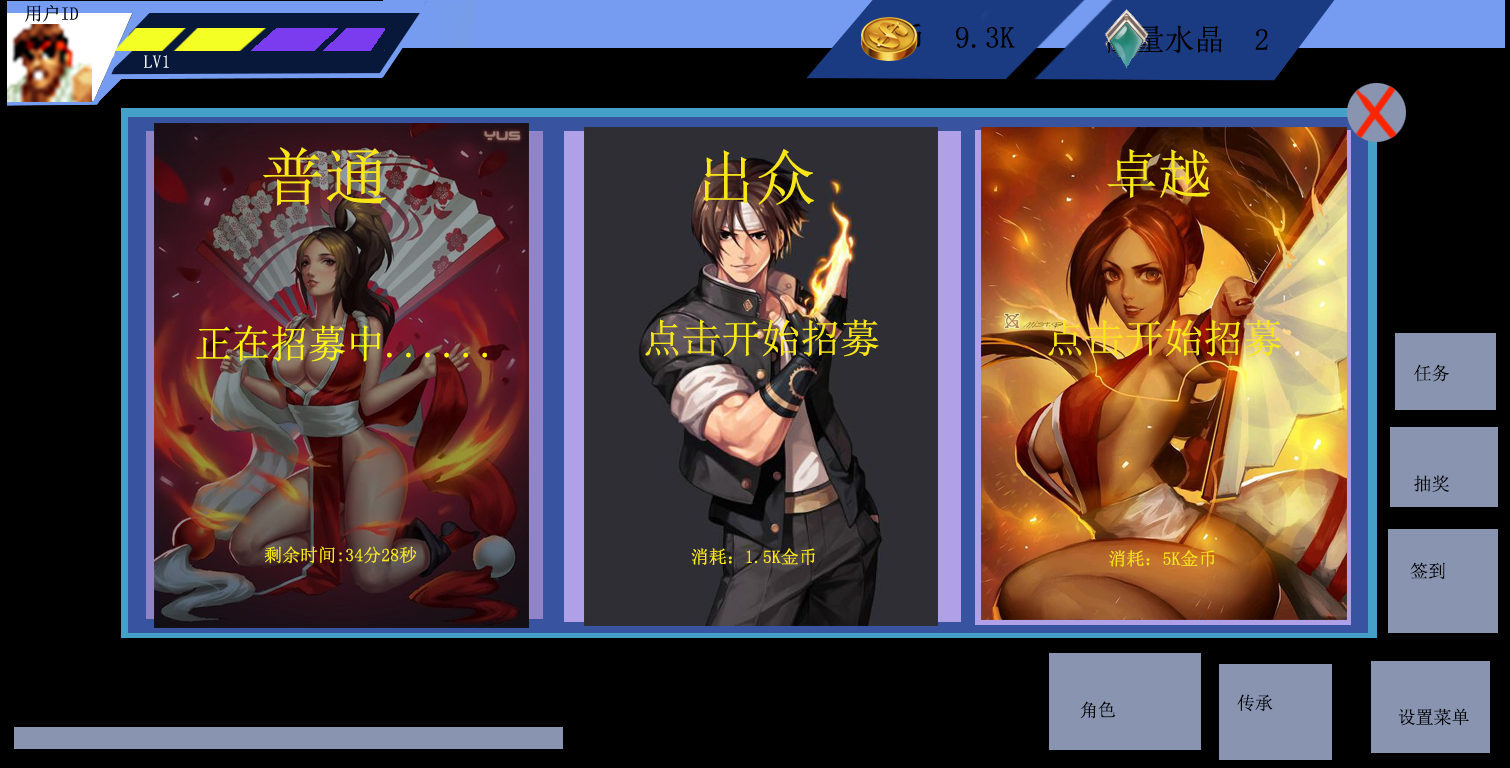
<style>
.page{position:relative;width:1510px;height:768px;background:#000000}
.page>*{position:absolute;margin:0}
.t1{font:63px "SimSun";color:#f9e616}
.t2{font:60px "SimSun";color:#f9e616}
.t3{font:53px "SimSun";color:#f9e616}
.t4{font:39px "SimSun";color:#fff600}
.t5{font:40px "SimSun";color:#f9e616}
.t6{font:18px "SimSun";color:#000000}
.t7{font:18px "SimSun";color:#f9e616}
</style>
<div class="page">
<p class="t1" style="left:263px;top:147px;width:123px;height:59px">普通</p>
<p class="t2" style="left:703px;top:149px;width:111px;height:56px">出众</p>
<p class="t3" style="left:1107px;top:149px;width:103px;height:49px">卓越</p>
<p class="t4" style="left:196px;top:325px;width:291px;height:37px">正在招募中......</p>
<p class="t5" style="left:645px;top:319px;width:234px;height:38px">点击开始招募</p>
<p class="t5" style="left:1048px;top:319px;width:234px;height:38px">点击开始招募</p>
<p class="t6" style="left:1414px;top:364px;width:35px;height:18px">任务</p>
<p class="t6" style="left:1414px;top:475px;width:35px;height:17px">抽奖</p>
<p class="t7" style="left:264px;top:546px;width:153px;height:18px">剩余时间:34分28秒</p>
<p class="t7" style="left:691px;top:548px;width:124px;height:17px">消耗：1.5K金币</p>
<p class="t7" style="left:1109px;top:550px;width:106px;height:17px">消耗：5K金币</p>
<p class="t6" style="left:1410px;top:562px;width:35px;height:18px">签到</p>
<p class="t6" style="left:1080px;top:701px;width:36px;height:18px">角色</p>
<p class="t6" style="left:1237px;top:694px;width:36px;height:18px">传承</p>
<p class="t6" style="left:1398px;top:708px;width:71px;height:18px">设置菜单</p>
</div>
